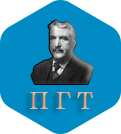
<style>
.page{position:relative;width:121px;height:134px;background:#008bc4}
.page>*{position:absolute;margin:0}
.t1{font:24px "Century";color:#d6ab8b}
</style>
<div class="page">
<p class="t1" style="left:30px;top:92px;width:63px;height:17px">П Г Т</p>
<p class="t1" style="left:30px;top:92px;width:63px;height:17px">П Г Т</p>
</div>
